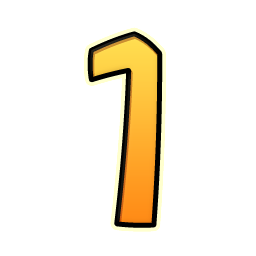
<style>
.page{position:relative;width:256px;height:256px;background:#ffffff}
.page>*{position:absolute;margin:0}
.t1{font:237.5px "YuyuGothictaiEGP-Extra-SJIS";scale:1.05 1}
</style>
<div class="page">
<p class="t1" style="left:90px;top:33px;width:70px;height:193px">1</p>
</div>
